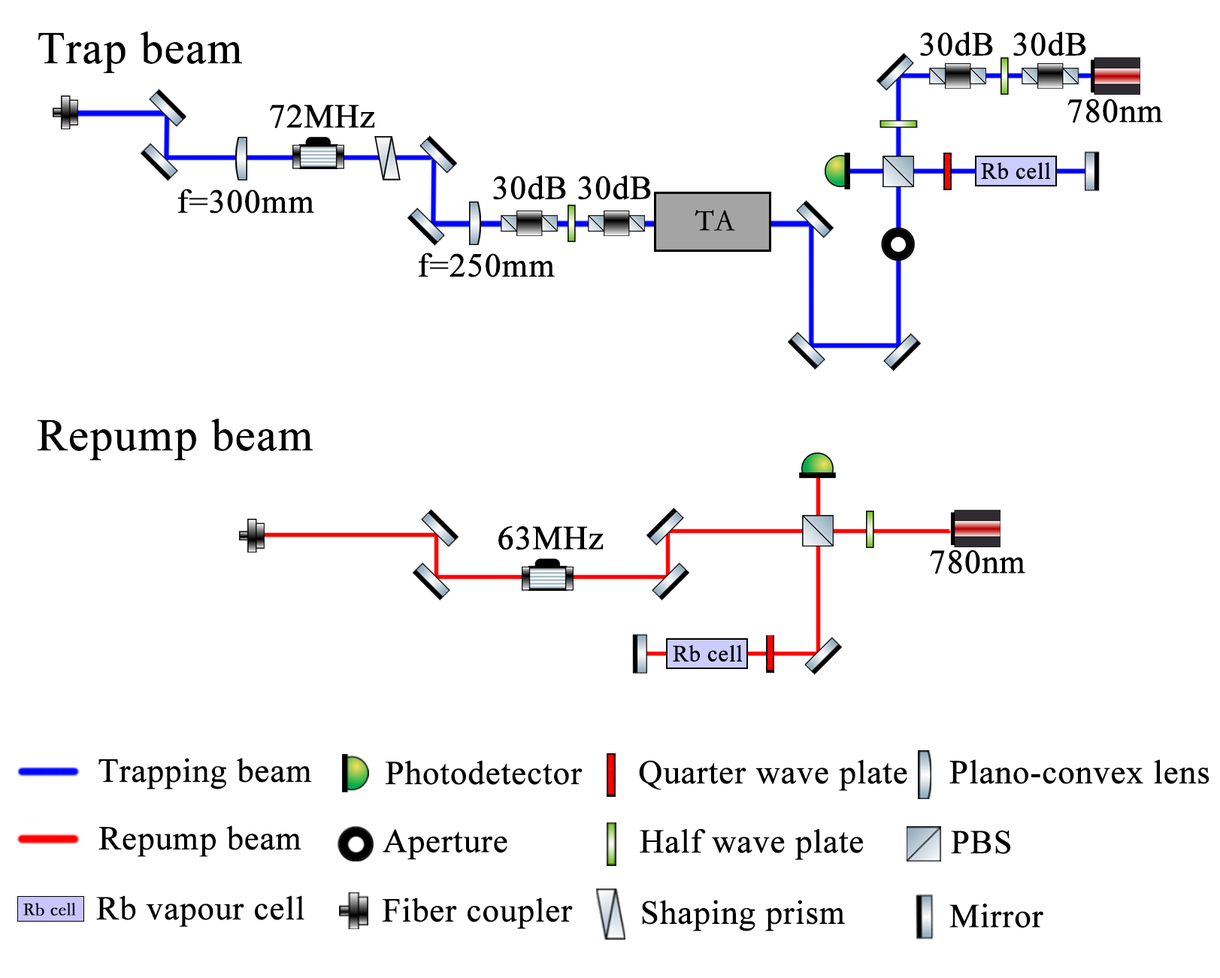
<style>
.page{position:relative;width:1220px;height:978px;background:#ffffff}
.page>*{position:absolute;margin:0}
.t1{font:45.5px "TimesNewRomanPSMT";color:#000000;font-weight:bold}
.t2{font:33.4px "TimesNewRomanPSMT";color:#000000;font-weight:bold}
.t3{font:23px "TimesNewRomanPSMT";color:#000000;font-weight:bold}
.t4{font:30.1px "STFangsong";color:#000000;font-weight:bold}
.t5{font:18.4px "STFangsong";color:#000000;font-weight:bold}
</style>
<div class="page">
<p class="t1" style="left:38px;top:31px;width:204px;height:43px">Trap beam</p>
<p class="t2" style="left:920px;top:32px;width:73px;height:24px">30dB</p>
<p class="t2" style="left:1013px;top:32px;width:73px;height:24px">30dB</p>
<p class="t2" style="left:1067px;top:98px;width:96px;height:24px">780nm</p>
<p class="t2" style="left:270px;top:104px;width:104px;height:25px">72MHz</p>
<p class="t3" style="left:981px;top:162px;width:70px;height:18px">Rb cell</p>
<p class="t2" style="left:493px;top:175px;width:73px;height:25px">30dB</p>
<p class="t2" style="left:578px;top:175px;width:73px;height:25px">30dB</p>
<p class="t2" style="left:178px;top:189px;width:136px;height:24px">f=300mm</p>
<p class="t4" style="left:694px;top:210px;width:41px;height:21px">TA</p>
<p class="t2" style="left:419px;top:252px;width:136px;height:25px">f=250mm</p>
<p class="t1" style="left:38px;top:418px;width:275px;height:43px">Repump beam</p>
<p class="t2" style="left:498px;top:526px;width:105px;height:24px">63MHz</p>
<p class="t2" style="left:930px;top:549px;width:95px;height:24px">780nm</p>
<p class="t3" style="left:673px;top:645px;width:69px;height:17px">Rb cell</p>
<p class="t2" style="left:98px;top:757px;width:214px;height:32px">Trapping beam</p>
<p class="t2" style="left:386px;top:760px;width:196px;height:25px">Photodetector</p>
<p class="t2" style="left:639px;top:759px;width:268px;height:32px">Quarter wave plate</p>
<p class="t2" style="left:949px;top:759px;width:260px;height:25px">Plano-convex lens</p>
<p class="t2" style="left:98px;top:825px;width:203px;height:32px">Repump beam</p>
<p class="t2" style="left:383px;top:829px;width:124px;height:31px">Aperture</p>
<p class="t2" style="left:640px;top:828px;width:223px;height:32px">Half wave plate</p>
<p class="t2" style="left:951px;top:830px;width:60px;height:24px">PBS</p>
<p class="t5" style="left:23px;top:903px;width:53px;height:13px">Rb cell</p>
<p class="t2" style="left:96px;top:895px;width:208px;height:32px">Rb vapour cell</p>
<p class="t2" style="left:382px;top:897px;width:191px;height:32px">Fiber coupler</p>
<p class="t2" style="left:642px;top:900px;width:203px;height:31px">Shaping prism</p>
<p class="t2" style="left:949px;top:903px;width:94px;height:24px">Mirror</p>
</div>
